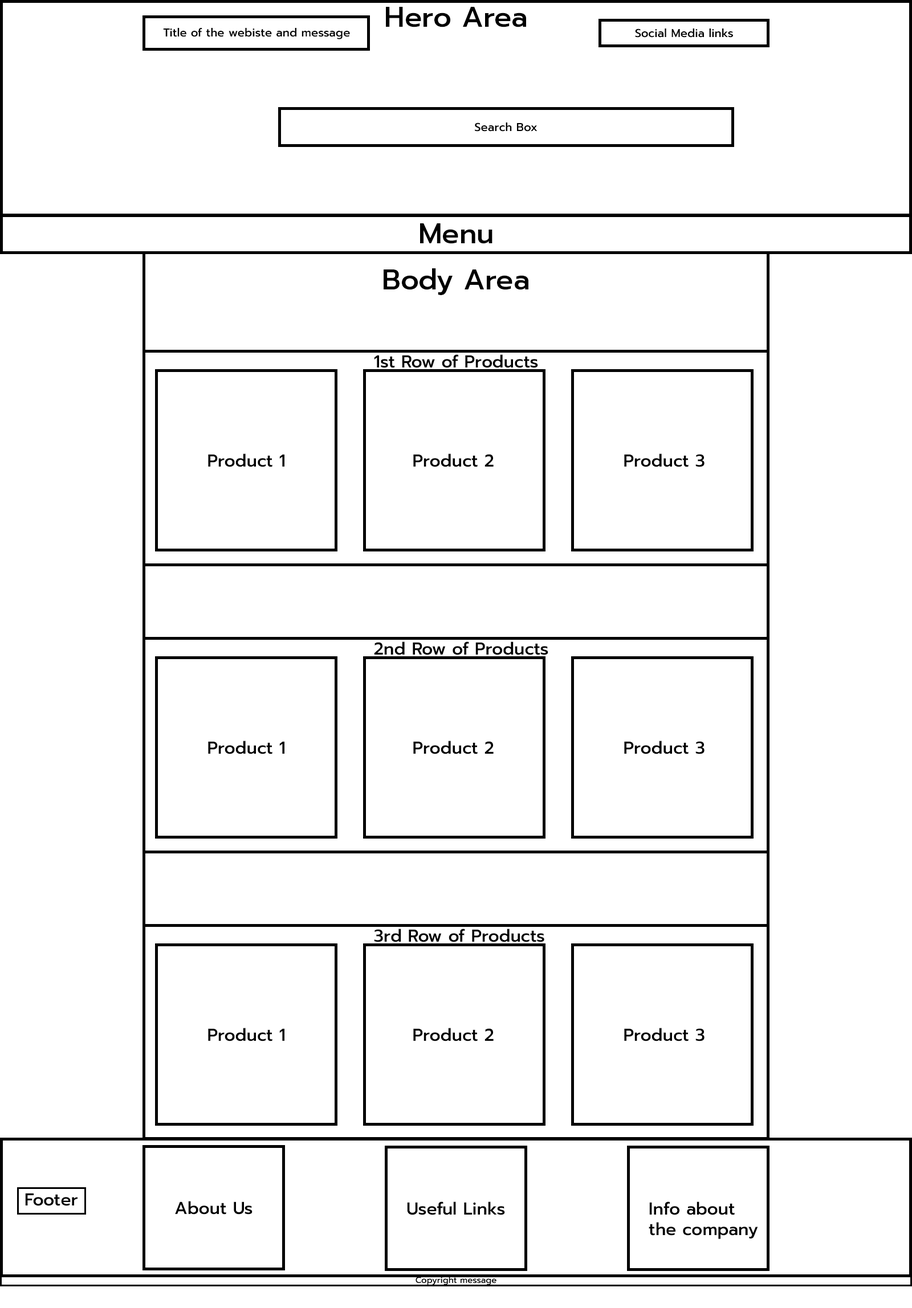
<style>
.page{position:relative;width:912px;height:1308px;background:#ffffff}
.page>*{position:absolute;margin:0}
.t1{font:28.5px "Prompt-Medium";color:#000000}
.t2{font:11.4px "Prompt-Medium";color:#000000}
.t3{font:17.1px "Prompt-Medium";color:#000000}
.t4{font:8.5px "Prompt-Medium";color:#000000}
</style>
<div class="page">
<p class="t1" style="left:386px;top:7px;width:140px;height:20px">Hero Area</p>
<p class="t2" style="left:163px;top:28px;width:187px;height:11px">Title of the webiste and message</p>
<p class="t2" style="left:635px;top:28px;width:98px;height:10px">Social Media links</p>
<p class="t2" style="left:475px;top:122px;width:62px;height:10px">Search Box</p>
<p class="t1" style="left:420px;top:223px;width:72px;height:21px">Menu</p>
<p class="t1" style="left:383px;top:268px;width:145px;height:27px">Body Area</p>
<p class="t3" style="left:374px;top:354px;width:164px;height:14px">1st Row of Products</p>
<p class="t3" style="left:208px;top:454px;width:76px;height:13px">Product 1</p>
<p class="t3" style="left:413px;top:454px;width:80px;height:13px">Product 2</p>
<p class="t3" style="left:624px;top:454px;width:80px;height:13px">Product 3</p>
<p class="t3" style="left:374px;top:642px;width:174px;height:13px">2nd Row of Products</p>
<p class="t3" style="left:208px;top:741px;width:76px;height:13px">Product 1</p>
<p class="t3" style="left:413px;top:741px;width:80px;height:13px">Product 2</p>
<p class="t3" style="left:624px;top:741px;width:80px;height:13px">Product 3</p>
<p class="t3" style="left:374px;top:929px;width:170px;height:13px">3rd Row of Products</p>
<p class="t3" style="left:208px;top:1028px;width:76px;height:13px">Product 1</p>
<p class="t3" style="left:413px;top:1028px;width:80px;height:13px">Product 2</p>
<p class="t3" style="left:624px;top:1028px;width:80px;height:13px">Product 3</p>
<p class="t3" style="left:25px;top:1193px;width:52px;height:13px">Footer</p>
<p class="t3" style="left:175px;top:1201px;width:77px;height:14px">About Us</p>
<p class="t3" style="left:407px;top:1202px;width:98px;height:13px">Useful Links</p>
<p class="t3" style="left:648px;top:1202px;width:110px;height:37px">Info about<br>the company</p>
<p class="t4" style="left:415px;top:1276px;width:81px;height:9px">Copyright message</p>
</div>
